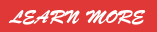
<style>
.page{position:relative;width:157px;height:32px;background:#e03837}
.page>*{position:absolute;margin:0}
.t1{font:18px "BrushScriptStd";color:#ffffff}
</style>
<div class="page">
<p class="t1" style="left:8px;top:10px;width:138px;height:15px">LEARN MORE</p>
</div>
